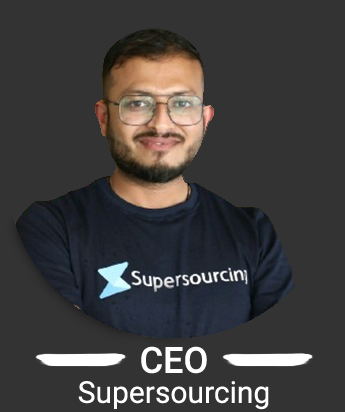
<style>
.page{position:relative;width:345px;height:412px;background:#333333}
.page>*{position:absolute;margin:0}
.t1{font:30px/30px "Roboto-Regular";color:#ffffff}
.t2{font:36px/30px "Roboto-Medium";color:#ffffff}
</style>
<div class="page">
<p class="t1" style="left:78px;top:346px;width:191px;height:64px;text-align:center"><span class="t2">CEO<br></span>Supersourcing</p>
</div>
